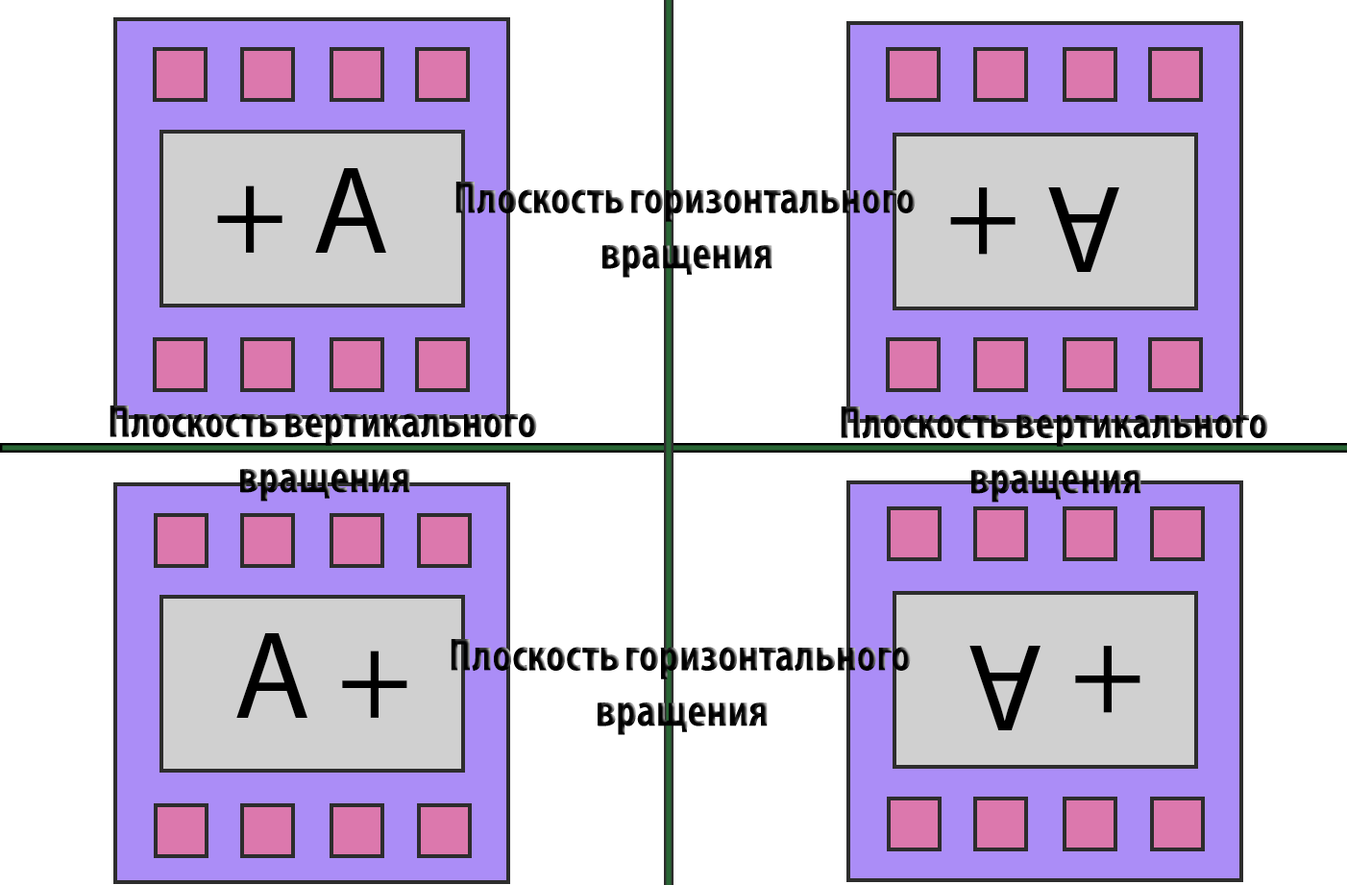
<style>
.page{position:relative;width:1347px;height:885px;background:#ffffff}
.page>*{position:absolute;margin:0}
.t1{font:125.5px "MyriadPro-Regular";color:#000000}
.t2{font:46.1px "MyriadPro-BoldCond";color:#000000}
</style>
<div class="page">
<p class="t1" style="left:217px;top:168px;width:169px;height:85px;rotate:180deg">A +</p>
<p class="t2" style="left:456px;top:182px;width:460px;height:96px;text-align:center">Плоскость горизонтального<br> вращения</p>
<p class="t1" style="left:950px;top:187px;width:170px;height:85px;rotate:180deg">A +</p>
<p class="t2" style="left:110px;top:406px;width:427px;height:96px;text-align:center">Плоскость вертикального<br> вращения</p>
<p class="t2" style="left:841px;top:406px;width:427px;height:97px;text-align:center">Плоскость вертикального<br> вращения</p>
<p class="t1" style="left:236px;top:633px;width:171px;height:85px">A +</p>
<p class="t2" style="left:451px;top:639px;width:460px;height:96px;text-align:center">Плоскость горизонтального<br> вращения</p>
<p class="t1" style="left:970px;top:646px;width:171px;height:84px">A +</p>
</div>
